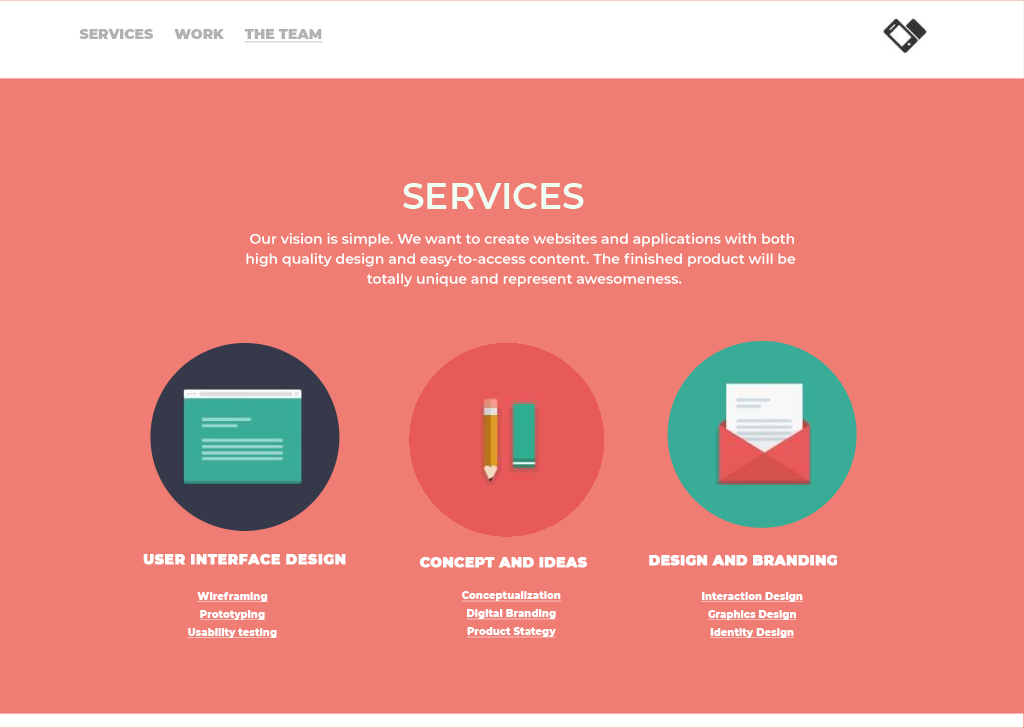
<style>
.page{position:relative;width:1024px;height:728px;background:#ef7d73}
.page>*{position:absolute;margin:0}
.t1{font:14px "Montserrat-Black";color:#b2b2b2}
.t2{font:14px "Montserrat-Black";color:#b2b2b2;text-decoration:underline}
.t3{font:36px "Montserrat-SemiBold";color:#f0fff3}
.t4{font:14px/20px "Montserrat-SemiBold";color:#ffffff}
.t5{font:14px "Montserrat-Black";letter-spacing:0.018em;color:#ffffff;font-weight:bold}
.t6{font:14px "Montserrat-Black";color:#ffffff;font-weight:bold}
.t7{font:10px/18px "Montserrat-Black";color:#ffffff;text-decoration:underline}
</style>
<div class="page">
<p class="t1" style="left:79px;top:29px;width:244px;height:14px">SERVICES     WORK     <span class="t2">THE TEAM</span></p>
<p class="t3" style="left:403px;top:183px;width:181px;height:26px">SERVICES</p>
<p class="t4" style="left:246px;top:233px;width:550px;height:54px;text-align:center">Our vision is simple. We want to create websites and applications with both<br>high quality design and easy-to-access content. The finished product will be <br> totally unique and represent awesomeness.</p>
<p class="t5" style="left:143px;top:554px;width:203px;height:11px">USER INTERFACE DESIGN</p>
<p class="t6" style="left:419px;top:557px;width:168px;height:11px">CONCEPT AND IDEAS</p>
<p class="t6" style="left:649px;top:555px;width:189px;height:11px">DESIGN AND BRANDING</p>
<p class="t7" style="left:187px;top:592px;width:91px;height:46px;text-align:center">Wireframing<br>Prototyping<br>Usability testing</p>
<p class="t7" style="left:461px;top:591px;width:100px;height:47px;text-align:center">Conceptualization<br>Digital Branding<br>Product Stategy</p>
<p class="t7" style="left:701px;top:592px;width:102px;height:46px;text-align:center">Interaction Design<br>Graphics Design<br>Identity Design</p>
</div>
